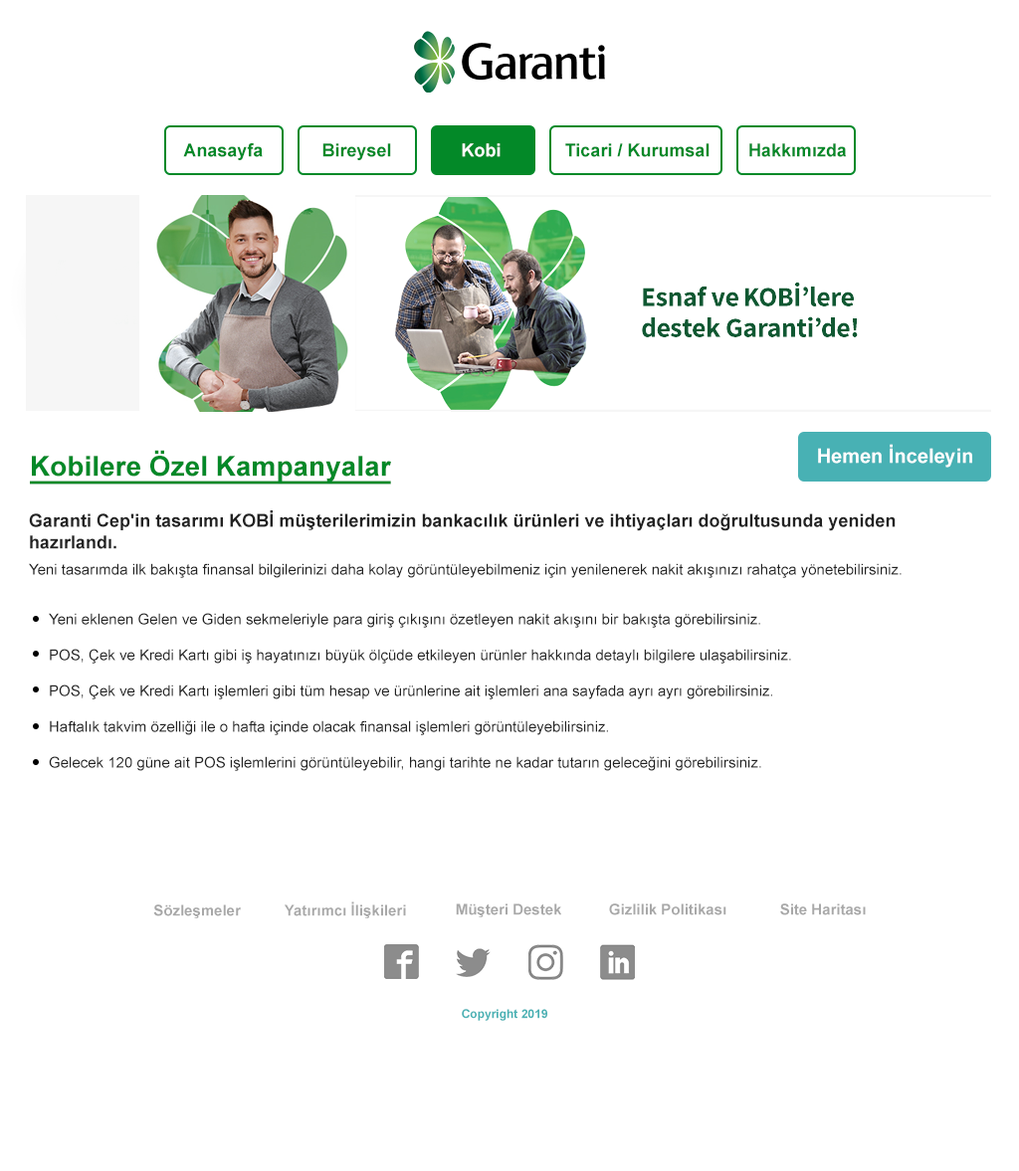
<style>
.page{position:relative;width:1019px;height:1171px;background:#ffffff}
.page>*{position:absolute;margin:0}
.t1{font:17.9px "Arial-BoldMT";color:#038928}
.t2{font:17.9px "Arial-BoldMT";color:#ffffff}
.t3{font:27.9px "Arial-BoldMT";color:#038928;text-decoration:underline}
.t4{font:19.9px "Arial-BoldMT";color:#ffffff}
.t5{font:17.9px "Arial-BoldMT";color:#222222}
.t6{font:14.9px "ArialMT";color:#222222}
.t7{font:14.9px "Arial-BoldMT";color:#a8a8a8}
.t8{font:11.9px "Arial-BoldMT";color:#48b1b4}
</style>
<div class="page">
<p class="t1" style="left:183px;top:143px;width:80px;height:17px">Anasayfa</p>
<p class="t1" style="left:322px;top:143px;width:69px;height:17px">Bireysel</p>
<p class="t2" style="left:462px;top:143px;width:38px;height:14px">Kobi</p>
<p class="t1" style="left:565px;top:143px;width:144px;height:14px">Ticari / Kurumsal</p>
<p class="t1" style="left:749px;top:143px;width:97px;height:14px">Hakkımızda</p>
<p class="t3" style="left:30px;top:450px;width:361px;height:34px">Kobilere Özel Kampanyalar</p>
<p class="t4" style="left:818px;top:444px;width:154px;height:23px">Hemen İnceleyin</p>
<p class="t5" style="left:29px;top:510px;width:866px;height:39px">Garanti Cep'in tasarımı KOBİ müşterilerimizin bankacılık ürünleri ve ihtiyaçları doğrultusunda yeniden hazırlandı.</p>
<p class="t6" style="left:29px;top:563px;width:872px;height:15px">Yeni tasarımda ilk bakışta finansal bilgilerinizi daha kolay görüntüleyebilmeniz için yenilenerek nakit akışınızı rahatça yönetebilirsiniz.</p>
<p class="t6" style="left:49px;top:613px;width:742px;height:158px">Yeni eklenen Gelen ve Giden sekmeleriyle para giriş çıkışını özetleyen nakit akışını bir bakışta görebilirsiniz.<br><br>POS, Çek ve Kredi Kartı gibi iş hayatınızı büyük ölçüde etkileyen ürünler hakkında detaylı bilgilere ulaşabilirsiniz.<br><br>POS, Çek ve Kredi Kartı işlemleri gibi tüm hesap ve ürünlerine ait işlemleri ana sayfada ayrı ayrı görebilirsiniz.<br><br>Haftalık takvim özelliği ile o hafta içinde olacak finansal işlemleri görüntüleyebilirsiniz.<br><br>Gelecek 120 güne ait POS işlemlerini görüntüleyebilir, hangi tarihte ne kadar tutarın geleceğini görebilirsiniz.</p>
<p class="t7" style="left:153px;top:904px;width:88px;height:14px">Sözleşmeler</p>
<p class="t7" style="left:284px;top:901px;width:122px;height:17px">Yatırımcı İlişkileri</p>
<p class="t7" style="left:456px;top:903px;width:105px;height:14px">Müşteri Destek</p>
<p class="t7" style="left:609px;top:903px;width:117px;height:12px">Gizlilik Politikası</p>
<p class="t7" style="left:780px;top:903px;width:85px;height:12px">Site Haritası</p>
<p class="t8" style="left:462px;top:1009px;width:85px;height:12px">Copyright 2019</p>
</div>
